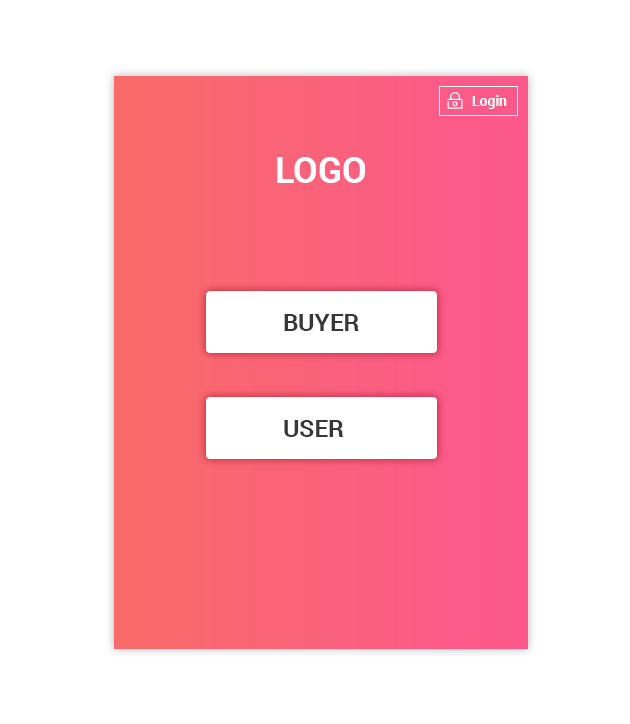
<style>
.page{position:relative;width:630px;height:724px;background:#ffffff}
.page>*{position:absolute;margin:0}
.t1{font:14px "Roboto-Bold";color:#ffffff}
.t2{font:36px "Roboto-Bold";color:#ffffff}
.t3{font:24px "Roboto-Bold";color:#373737}
</style>
<div class="page">
<p class="t1" style="left:472px;top:95px;width:35px;height:14px">Login</p>
<p class="t2" style="left:277px;top:157px;width:88px;height:26px">LOGO</p>
<p class="t3" style="left:284px;top:314px;width:75px;height:17px">BUYER</p>
<p class="t3" style="left:284px;top:420px;width:60px;height:17px">USER</p>
</div>
